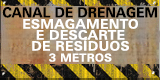
<style>
.page{position:relative;width:160px;height:80px}
.page>*{position:absolute;margin:0}
.t1{font:14px "UniversNextPro-Bold";color:#000000;text-transform:uppercase;scale:0.95 1}
.t2{font:13px/11px "UniversNextPro-Bold";letter-spacing:0.02em;color:#ffffff;text-transform:uppercase;scale:1.04 1}
.t3{font:11px "UniversNextPro-Bold";letter-spacing:0.02em;color:#ffffff;text-transform:uppercase;scale:1.04 1}
</style>
<div class="page">
<p class="t1" style="left:2px;top:7px;width:155px;height:11px">Canal de drenagem</p>
<p class="t2" style="left:23px;top:18px;width:115px;height:33px;text-align:center">Esmagamento<br>e descarte<br>de resíduos</p>
<p class="t3" style="left:49px;top:53px;width:63px;height:9px">3 METROS</p>
</div>
